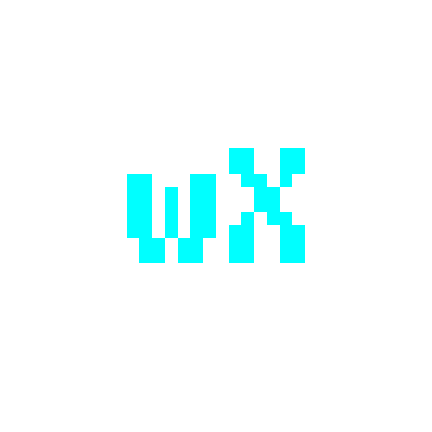
<style>
.page{position:relative;width:432px;height:432px;background:#ffffff}
.page>*{position:absolute;margin:0}
.t1{font:163px "Fixedsys";color:#00ffff}
</style>
<div class="page">
<p class="t1" style="left:127px;top:148px;width:178px;height:115px">wX</p>
</div>
